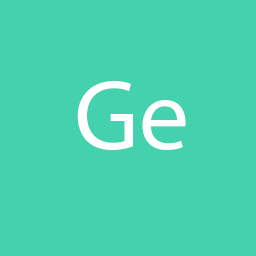
<style>
.page{position:relative;width:256px;height:256px;background:#44d1ae}
.page>*{position:absolute;margin:0}
.t1{font:100px "MyriadPro-Regular";color:#ffffff}
</style>
<div class="page">
<p class="t1" style="left:77px;top:81px;width:109px;height:69px">Ge</p>
</div>
